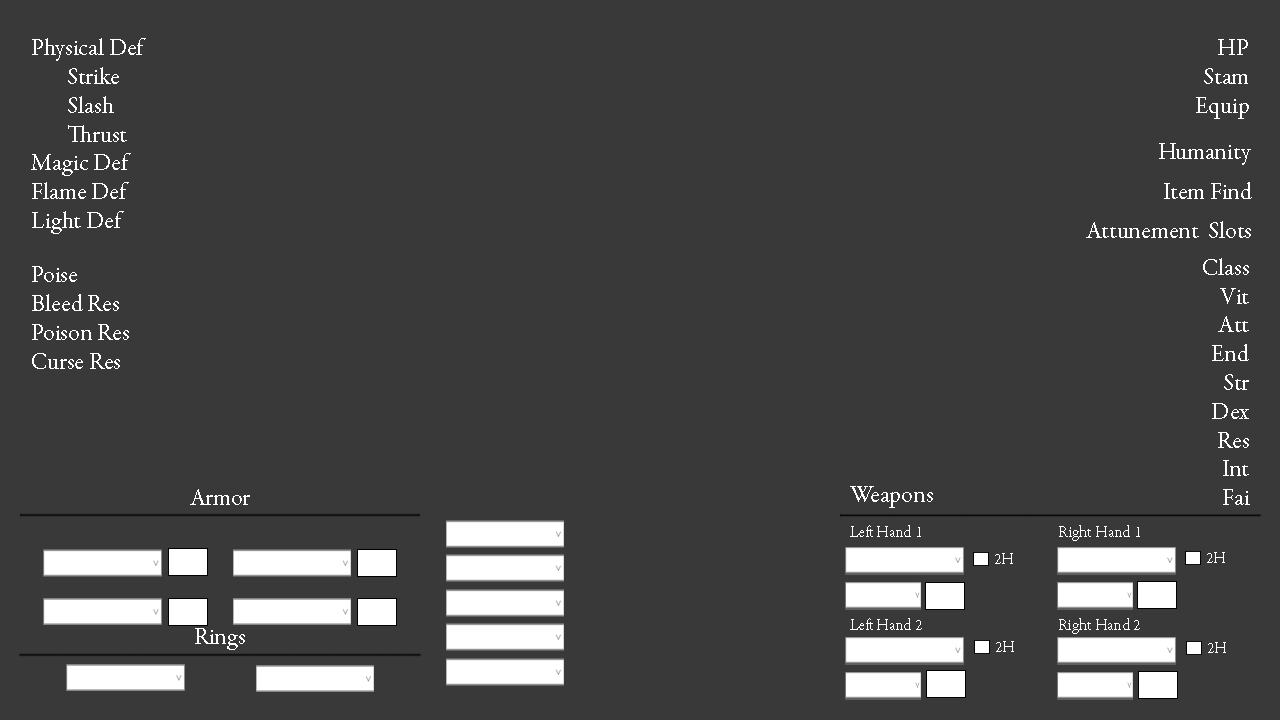
<style>
.page{position:relative;width:1280px;height:720px;background:#393939}
.page>*{position:absolute;margin:0}
.t1{font:24px "GaramondPremrPro";color:#ffffff}
.t2{font:16px "GaramondPremrPro";color:#ffffff}
</style>
<div class="page">
<p class="t1" style="left:31px;top:38px;width:115px;height:196px">Physical Def<br> Strike<br> Slash<br> Thrust<br>Magic Def<br>Flame Def<br>Light Def</p>
<p class="t1" style="left:1196px;top:39px;width:53px;height:80px;text-align:right">HP<br>Stam<br>Equip</p>
<p class="t1" style="left:1159px;top:143px;width:92px;height:22px">Humanity</p>
<p class="t1" style="left:1164px;top:182px;width:88px;height:17px">Item Find</p>
<p class="t1" style="left:1086px;top:221px;width:165px;height:17px">Attunement  Slots</p>
<p class="t1" style="left:32px;top:266px;width:97px;height:103px">Poise<br>Bleed Res<br>Poison Res<br>Curse Res</p>
<p class="t1" style="left:1203px;top:258px;width:47px;height:247px;text-align:right">Class<br>Vit<br>Att<br>End<br>Str<br>Dex<br>Res<br>Int<br>Fai</p>
<p class="t1" style="left:850px;top:486px;width:83px;height:22px">Weapons</p>
<p class="t1" style="left:190px;top:489px;width:60px;height:16px">Armor</p>
<p class="t2" style="left:850px;top:525px;width:71px;height:12px">Left Hand 1</p>
<p class="t2" style="left:1059px;top:525px;width:81px;height:16px">Right Hand 1</p>
<p class="t2" style="left:995px;top:553px;width:18px;height:11px">2H</p>
<p class="t2" style="left:1207px;top:552px;width:18px;height:11px">2H</p>
<p class="t1" style="left:195px;top:628px;width:50px;height:22px">Rings</p>
<p class="t2" style="left:850px;top:618px;width:72px;height:12px">Left Hand 2</p>
<p class="t2" style="left:1059px;top:618px;width:81px;height:16px">Right Hand 2</p>
<p class="t2" style="left:996px;top:641px;width:18px;height:11px">2H</p>
<p class="t2" style="left:1208px;top:642px;width:18px;height:11px">2H</p>
</div>
